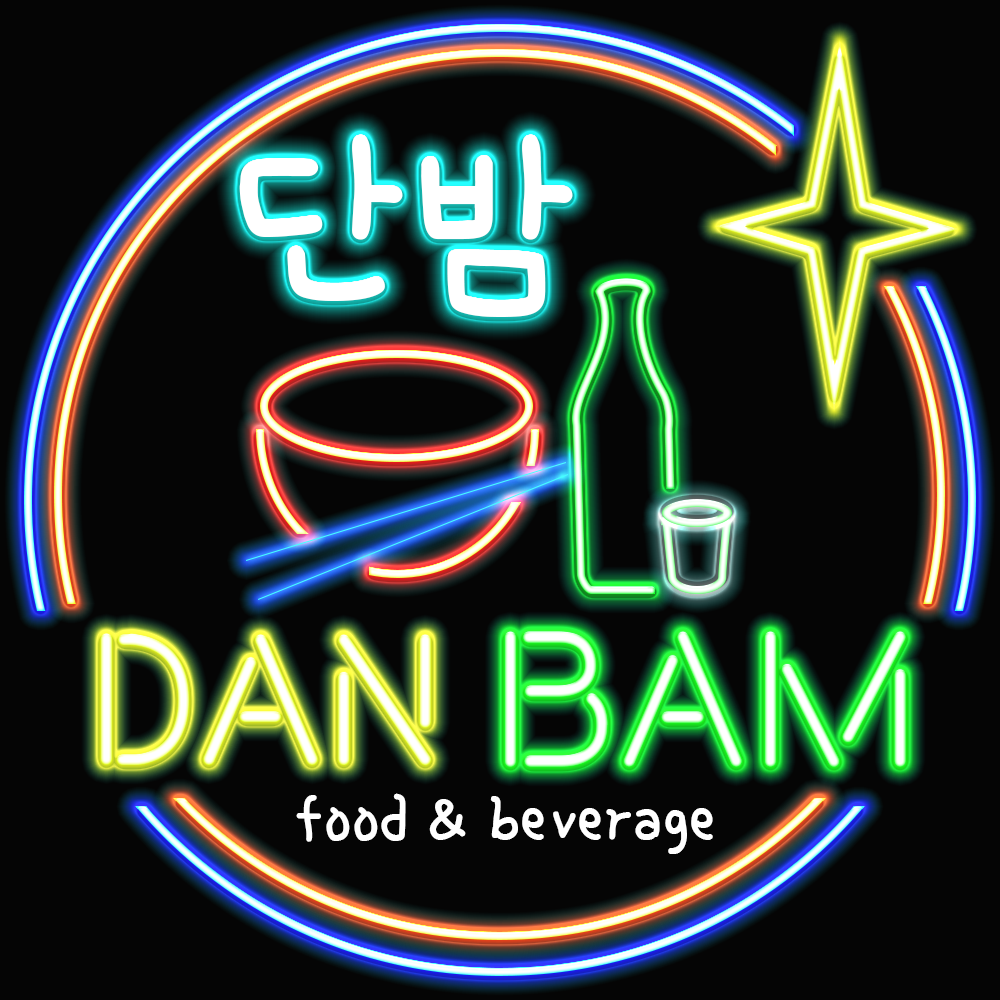
<style>
.page{position:relative;width:1000px;height:1000px;background:#050505}
.page>*{position:absolute;margin:0}
.t1{font:211.4px "SingleDay-Regular";color:#ffffff}
.t2{font:195px "Beon-Medium";color:#ffffff}
.t3{font:187.5px "Beon-Medium"}
.t4{font:70.8px "SingleDay-Regular";color:#ffffff}
</style>
<div class="page">
<p class="t1" style="left:239px;top:134px;width:334px;height:183px">단밤</p>
<p class="t2" style="left:504px;top:630px;width:403px;height:138px">bam</p>
<p class="t3" style="left:100px;top:633px;width:332px;height:133px">Dan</p>
<p class="t4" style="left:296px;top:793px;width:417px;height:61px">food &amp; beverage</p>
</div>
